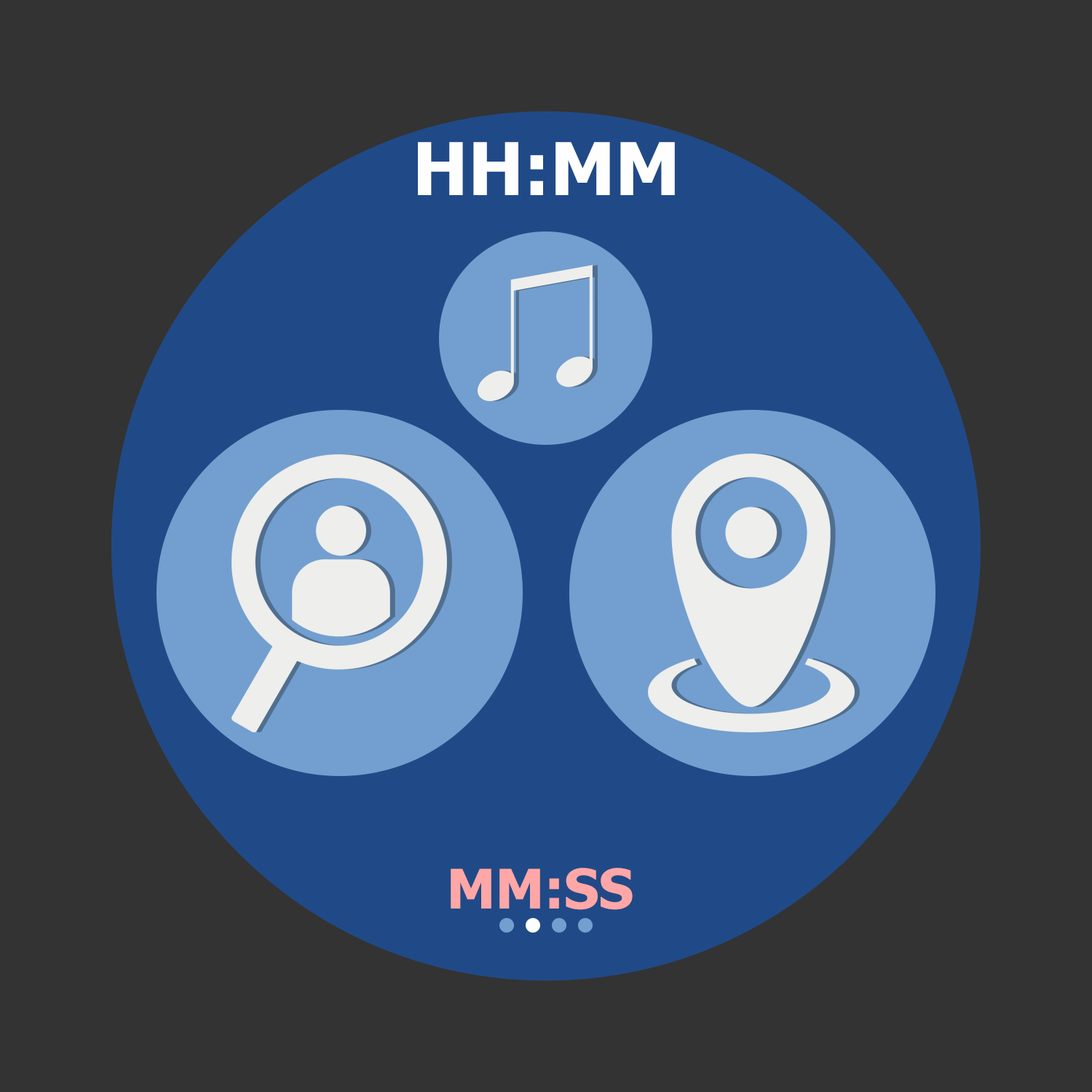
<style>
.page{position:relative;width:1092px;height:1092px;background:#333333}
.page>*{position:absolute;margin:0}
.t1{font:72.8px "Tahoma-Bold";color:#fefefe}
.t2{font:54.6px "Tahoma-Bold";color:#ffa7a7}
</style>
<div class="page">
<p class="t1" style="left:418px;top:142px;width:257px;height:53px">HH:MM</p>
<p class="t2" style="left:451px;top:868px;width:182px;height:42px">MM:SS</p>
</div>
